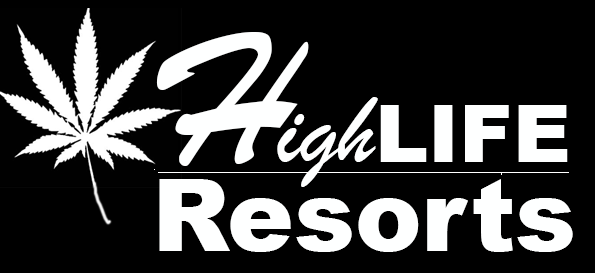
<style>
.page{position:relative;width:595px;height:273px;background:#000000}
.page>*{position:absolute;margin:0}
.t1{font:80px "Arial-Black";color:#feffff}
.t2{font:200px "BrushScriptMT";color:#feffff}
.t3{font:100px "BrushScriptMT";color:#feffff}
.t4{font:100px "Arial-Black";color:#feffff}
</style>
<div class="page">
<p class="t1" style="left:156px;top:32px;width:412px;height:155px"><span class="t2">H</span><span class="t3">igh</span>LIFE</p>
<p class="t4" style="left:159px;top:179px;width:414px;height:73px">Resorts</p>
</div>
